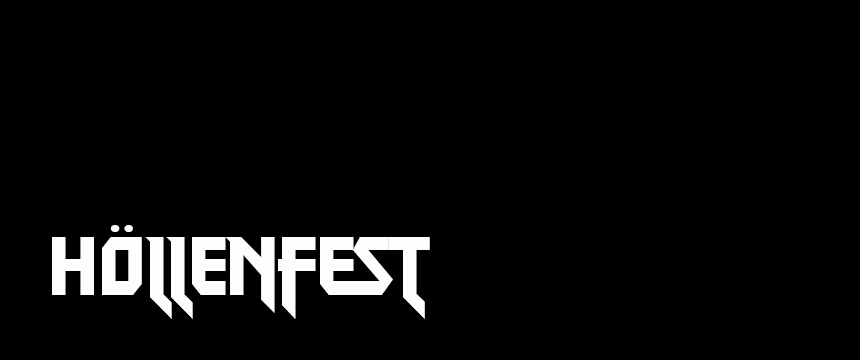
<style>
.page{position:relative;width:860px;height:360px;background:#000000}
.page>*{position:absolute;margin:0}
.t1{font:80px "MetalLord";color:#fefefe}
</style>
<div class="page">
<p class="t1" style="left:52px;top:225px;width:378px;height:94px">höLLENFesT</p>
</div>
